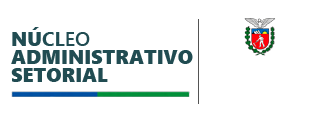
<style>
.page{position:relative;width:320px;height:128px;background:#ffffff}
.page>*{position:absolute;margin:0}
.t1{font:20px/18px "SegoeUIBlack";color:#214c52}
.t2{font:20px/18px "SegoeUI-Bold";color:#214c52}
.t3{font:20px/18px "SegoeUI-Semibold";color:#214c52}
</style>
<div class="page">
<p class="t1" style="left:11px;top:27px;width:182px;height:55px">NÚ<span class="t2">CL</span><span class="t3">EO<br></span>ADMINISTRATIVO<br>SETORIAL</p>
</div>
